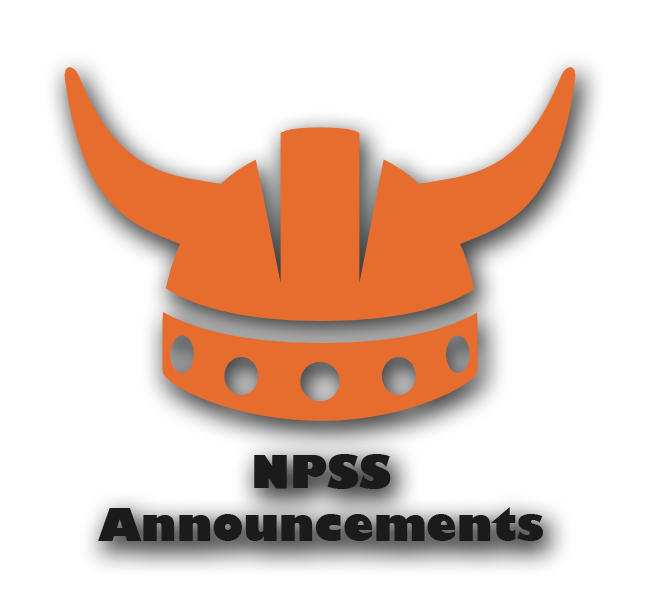
<style>
.page{position:relative;width:658px;height:614px;background:#ffffff}
.page>*{position:absolute;margin:0}
.t1{font:44px "GillSans-UltraBold";color:#1c1b1b}
</style>
<div class="page">
<p class="t1" style="left:98px;top:454px;width:445px;height:87px;text-align:center">NPSS<br>Announcements</p>
</div>
